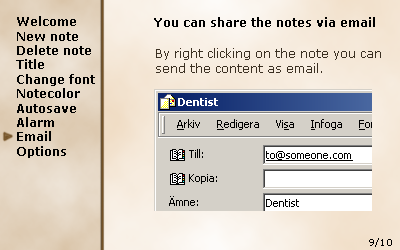
<style>
.page{position:relative;width:400px;height:250px}
.page>*{position:absolute;margin:0}
.t1{font:12px "Verdana-Bold";color:#010101}
.t2{font:12px "Verdana-Bold";color:#000000}
.t3{font:12px "Verdana";color:#3b3022}
.t4{font:9px "Verdana";color:#000000}
</style>
<div class="page">
<p class="t1" style="left:16px;top:16px;width:79px;height:142px">Welcome<br>New note<br>Delete note<br>Title<br>Change font<br>Notecolor<br>Autosave<br>Alarm<br>Email<br>Options</p>
<p class="t2" style="left:154px;top:17px;width:221px;height:10px">You can share the notes via email</p>
<p class="t3" style="left:156px;top:48px;width:225px;height:25px">By right clicking on the note you can<br>send the content as email.</p>
<p class="t4" style="left:369px;top:238px;width:23px;height:9px">9/10</p>
</div>
